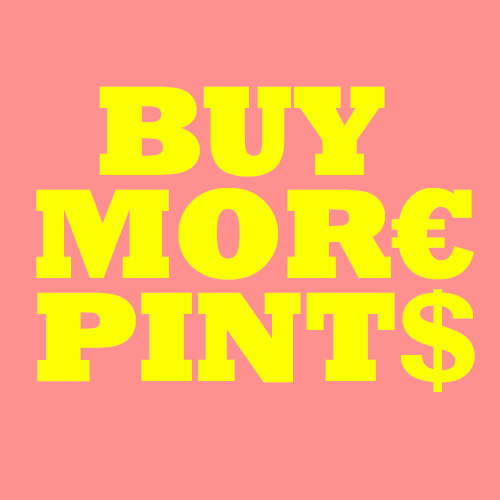
<style>
.page{position:relative;width:500px;height:500px;background:#ff9090}
.page>*{position:absolute;margin:0}
.t1{font:129.7px/103.1px "Rockwell-ExtraBold";letter-spacing:-0.018em;color:#fcff00}
</style>
<div class="page">
<p class="t1" style="left:36px;top:86px;width:439px;height:306px;text-align:center">BUY <br>MOR€<br>PINT$</p>
</div>
